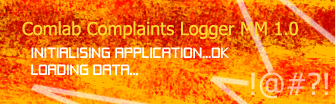
<style>
.page{position:relative;width:335px;height:104px}
.page>*{position:absolute;margin:0}
.t1{font:18px "Tahoma";color:#ffd52f}
.t2{font:14px "ZeroThrees";color:#ffffff}
.t3{font:30px "Tahoma"}
</style>
<div class="page">
<p class="t1" style="left:22px;top:21px;width:276px;height:18px">Comlab Complaints Logger MM 1.0</p>
<p class="t2" style="left:31px;top:47px;width:198px;height:29px">INITIALISING APPLICATION...OK<br>LOADING DATA...</p>
<p class="t3" style="left:251px;top:72px;width:77px;height:27px">!@#?!</p>
</div>
